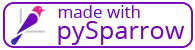
<style>
.page{position:relative;width:195px;height:50px;background:#ffffff}
.page>*{position:absolute;margin:0}
.t1{font:16.7px "OpenSans-Regular";letter-spacing:0.01em;color:#700ab7}
.t2{font:25px "OpenSans-Regular";letter-spacing:0.01em;color:#700ab7}
</style>
<div class="page">
<p class="t1" style="left:58px;top:5px;width:82px;height:13px">made with</p>
<p class="t2" style="left:58px;top:21px;width:127px;height:24px">pySparrow</p>
</div>
